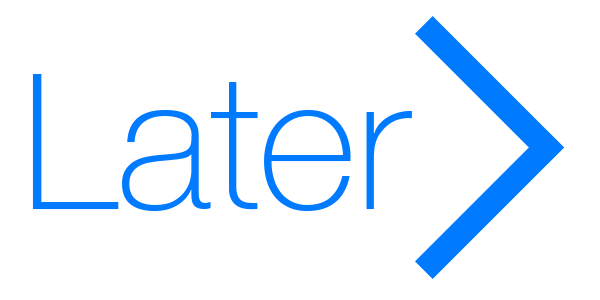
<style>
.page{position:relative;width:600px;height:300px;background:#ffffff}
.page>*{position:absolute;margin:0}
.t1{font:189.1px "HelveticaNeue-Thin";color:#007aff}
</style>
<div class="page">
<p class="t1" style="left:32px;top:74px;width:380px;height:137px">Later</p>
</div>
